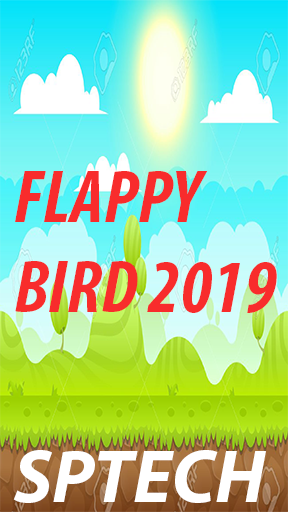
<style>
.page{position:relative;width:288px;height:512px}
.page>*{position:absolute;margin:0}
.t1{font:75px "MyriadPro-BoldCondIt";color:#f82c2c}
.t2{font:75px "MyriadPro-BoldIt";color:#ffffff}
</style>
<div class="page">
<p class="t1" style="left:15px;top:171px;width:262px;height:142px">FLAPPY <br>BIRD 2019</p>
<p class="t2" style="left:13px;top:450px;width:253px;height:53px">SPTECH</p>
</div>
